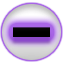
<style>
.page{position:relative;width:64px;height:64px;background:#ffffff}
.page>*{position:absolute;margin:0}
.t1{font:150px "MyriadPro-Regular";color:#000000}
</style>
<div class="page">
<p class="t1" style="left:13px;top:27px;width:37px;height:10px">-</p>
</div>
